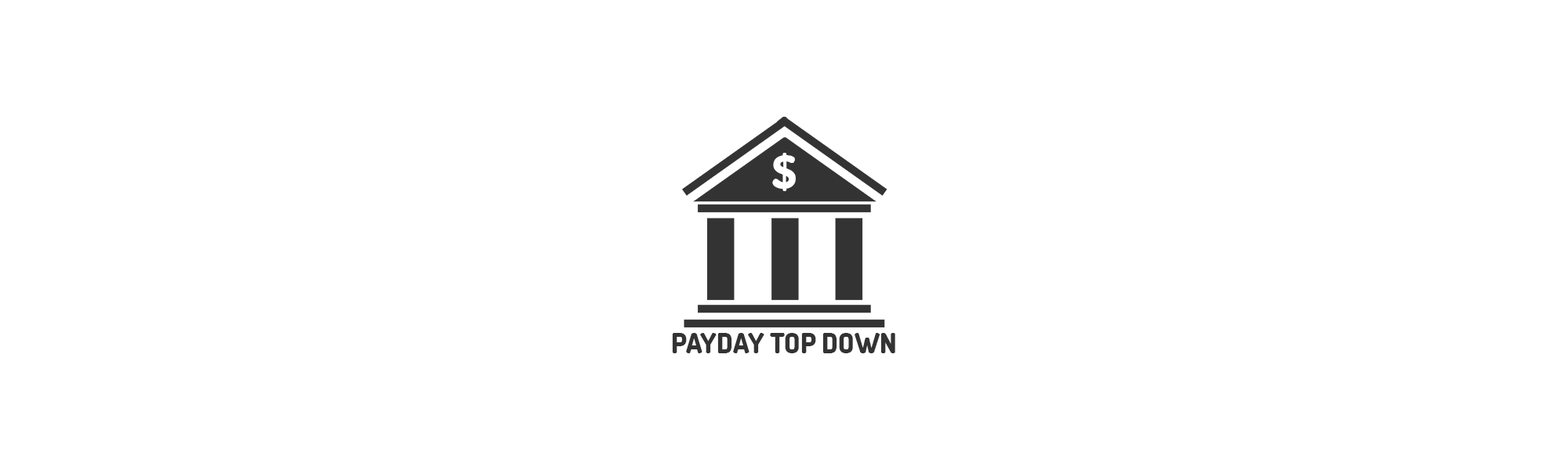
<style>
.page{position:relative;width:1568px;height:470px;background:#ffffff}
.page>*{position:absolute;margin:0}
.t1{font:46.8px "Dosis-ExtraBold";color:#ffffff}
.t2{font:27.8px "Dosis-ExtraBold";color:#333333}
</style>
<div class="page">
<p class="t1" style="left:772px;top:153px;width:24px;height:38px">$</p>
<p class="t2" style="left:672px;top:333px;width:223px;height:21px">PAYDAY TOP DOWN</p>
</div>
